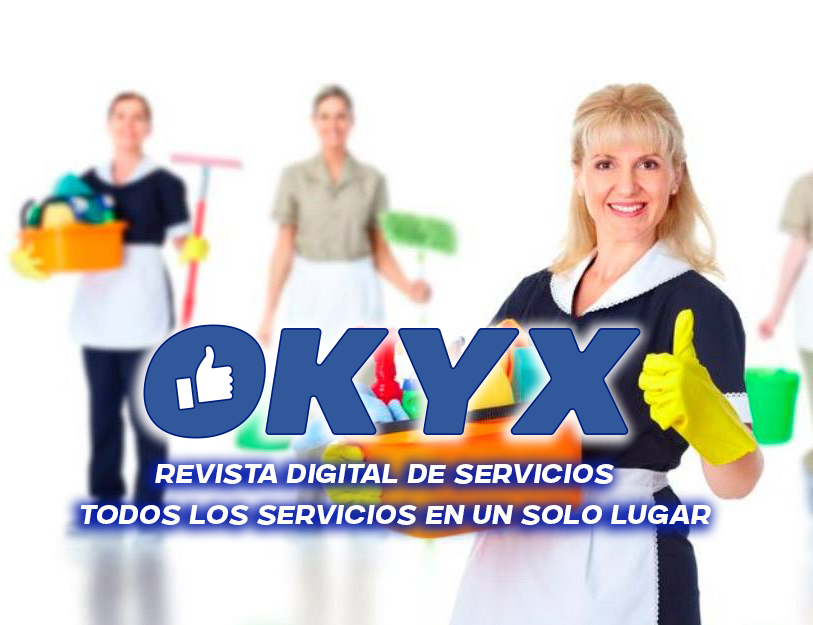
<style>
.page{position:relative;width:813px;height:625px;background:#ffffff}
.page>*{position:absolute;margin:0}
.t1{font:24px "FONTSPRINGDEMO-GunterzMedItalic";color:#ffffff}
</style>
<div class="page">
<p class="t1" style="left:155px;top:464px;width:459px;height:20px">REVISTA DIGITAL DE SERVICIOS</p>
<p class="t1" style="left:80px;top:505px;width:631px;height:20px">todos los servicios en un soLO lugar</p>
</div>
